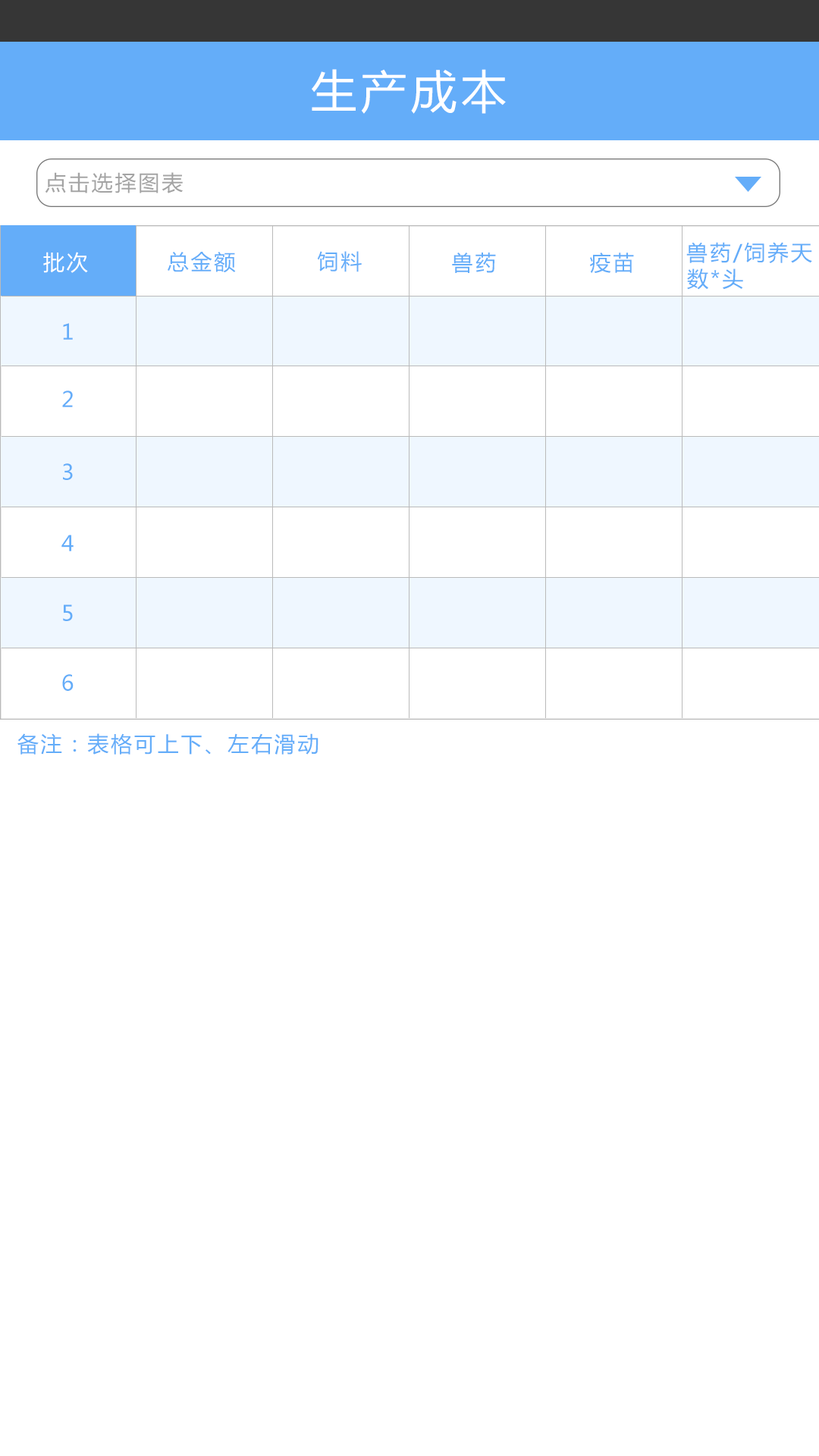
<style>
.page{position:relative;width:819px;height:1456px;background:#ffffff}
.page>*{position:absolute;margin:0}
.t1{font:45.5px "MicrosoftYaHei";letter-spacing:0.1em;color:#ffffff}
.t2{font:21.2px "MicrosoftYaHei";letter-spacing:0.1em;color:#a4a4a4}
.t3{font:21.2px "MicrosoftYaHei";letter-spacing:0.1em;color:#64adf9}
.t4{font:21.2px "MicrosoftYaHei";letter-spacing:0.1em;color:#ffffff}
</style>
<div class="page">
<p class="t1" style="left:312px;top:69px;width:194px;height:45px">生产成本</p>
<p class="t2" style="left:45px;top:172px;width:138px;height:21px">点击选择图表</p>
<p class="t3" style="left:686px;top:242px;width:126px;height:21px">兽药/饲养天</p>
<p class="t4" style="left:43px;top:252px;width:45px;height:21px">批次</p>
<p class="t3" style="left:168px;top:252px;width:68px;height:21px">总金额</p>
<p class="t3" style="left:317px;top:251px;width:45px;height:21px">饲料</p>
<p class="t3" style="left:452px;top:253px;width:44px;height:20px">兽药</p>
<p class="t3" style="left:590px;top:253px;width:44px;height:20px">疫苗</p>
<p class="t3" style="left:687px;top:268px;width:56px;height:22px">数*头</p>
<p class="t3" style="left:63px;top:323px;width:10px;height:17px">1</p>
<p class="t3" style="left:62px;top:391px;width:11px;height:16px">2</p>
<p class="t3" style="left:63px;top:463px;width:10px;height:17px">3</p>
<p class="t3" style="left:61px;top:535px;width:13px;height:16px">4</p>
<p class="t3" style="left:63px;top:604px;width:10px;height:17px">5</p>
<p class="t3" style="left:62px;top:674px;width:12px;height:17px">6</p>
<p class="t3" style="left:17px;top:733px;width:301px;height:22px">备注：表格可上下、左右滑动</p>
</div>
